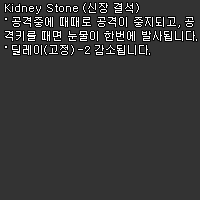
<style>
.page{position:relative;width:200px;height:200px;background:#333333}
.page>*{position:absolute;margin:0}
.t1{font:11px/14px "Dotum";color:#ffffff}
</style>
<div class="page">
<p class="t1" style="left:5px;top:3px;width:192px;height:52px">Kidney Stone (신장 결석)<br>˚ 공격중에 때때로 공격이 중지되고, 공<br>격키를 때면 눈물이 한번에 발사됩니다.<br>˚ 딜레이(고정) -2 감소됩니다.</p>
</div>
